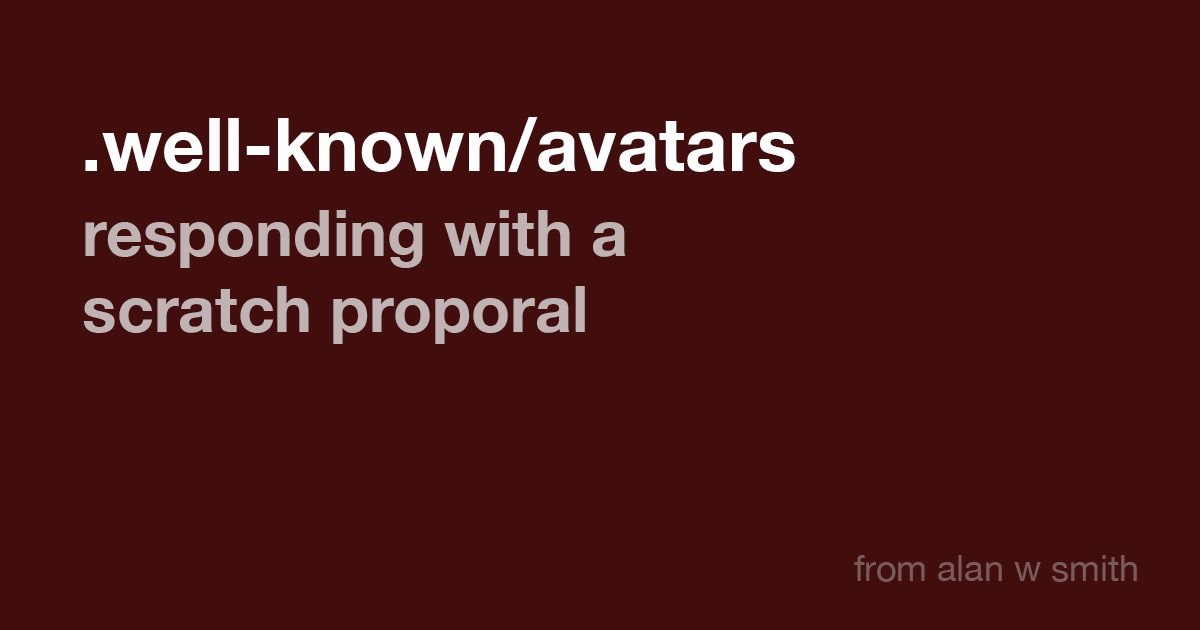
<style>
.page{position:relative;width:1200px;height:630px;background:#420d0d}
.page>*{position:absolute;margin:0}
.t1{font:74px "HelveticaNeue-Bold";color:#ffffff}
.t2{font:64px "HelveticaNeue-Bold";color:#bfb3b3}
.t3{font:36px "HelveticaNeue";color:#785c5c}
</style>
<div class="page">
<p class="t1" style="left:85px;top:117px;width:710px;height:55px">.well-known/avatars</p>
<p class="t2" style="left:83px;top:210px;width:543px;height:134px">responding with a<br>scratch proporal</p>
<p class="t3" style="left:854px;top:555px;width:283px;height:27px">from alan w smith</p>
</div>
